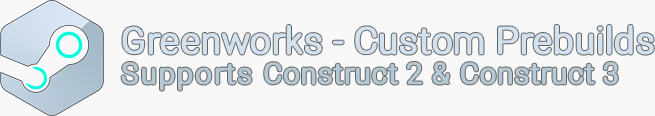
<style>
.page{position:relative;width:655px;height:116px;background:#f8f8f8}
.page>*{position:absolute;margin:0}
.t1{font:38px/30px "Roboto-Round-Regular";letter-spacing:-0.025em;color:#d2e1f0;font-weight:bold}
.t2{font:30px/30px "Roboto-Round-Regular";letter-spacing:0.025em;color:#b5c8d6;font-weight:bold}
.t3{font:30px/30px "Roboto-Round-Regular";letter-spacing:-0.01em;color:#b5c8d6;font-weight:bold}
.t4{font:30px/30px "Roboto-Round-Regular";color:#b5c8d6;font-weight:bold}
</style>
<div class="page">
<p class="t1" style="left:121px;top:25px;width:533px;height:66px">Greenworks - Custom Prebuilds<br><span class="t2">Supports </span><span class="t3">Construct 2</span><span class="t4"> &amp; </span><span class="t3">Construct 3</span></p>
</div>
